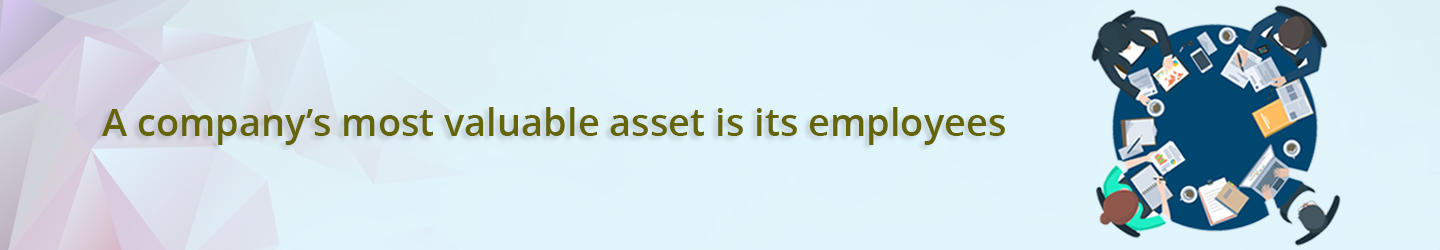
<style>
.page{position:relative;width:1440px;height:250px}
.page>*{position:absolute;margin:0}
.t1{font:38px "OpenSans-Semibold";color:#656407}
</style>
<div class="page">
<p class="t1" style="left:102px;top:107px;width:903px;height:38px">A company’s most valuable asset is its employees</p>
</div>
